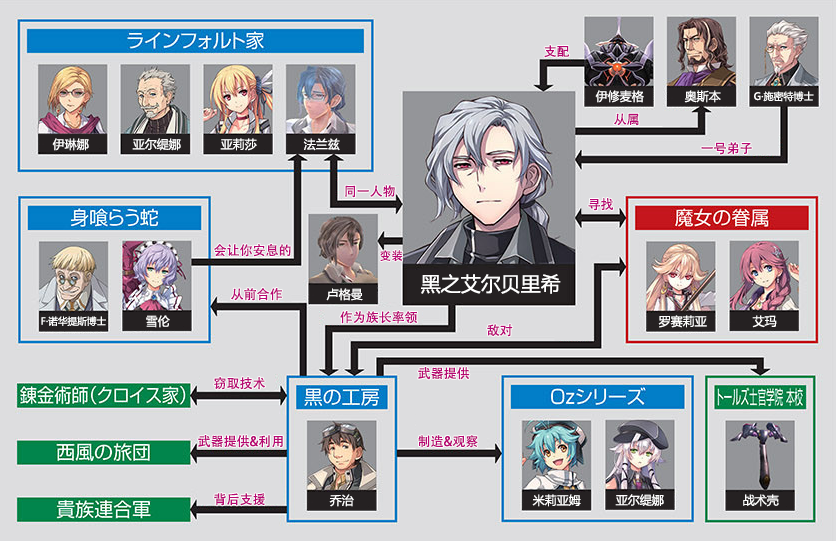
<style>
.page{position:relative;width:836px;height:541px;background:#dddddf}
.page>*{position:absolute;margin:0}
.t1{font:13px "AdobeHeitiStd-Regular";color:#b70773}
.t2{font:12px "MicrosoftYaHei";color:#ffffff}
.t3{font:10px "MicrosoftYaHei";color:#ffffff}
.t4{font:11.7px "AdobeHeitiStd-Regular";color:#b70773}
.t5{font:20px "MicrosoftYaHei";color:#ffffff}
.t6{font:9.7px "MicrosoftYaHei";color:#ffffff}
</style>
<div class="page">
<p class="t1" style="left:544px;top:45px;width:26px;height:13px">支配</p>
<p class="t2" style="left:595px;top:90px;width:49px;height:13px">伊修麦格</p>
<p class="t2" style="left:684px;top:90px;width:37px;height:13px">奥斯本</p>
<p class="t3" style="left:754px;top:91px;width:60px;height:11px">G·施密特博士</p>
<p class="t1" style="left:614px;top:113px;width:25px;height:13px">从属</p>
<p class="t2" style="left:52px;top:138px;width:37px;height:13px">伊琳娜</p>
<p class="t2" style="left:132px;top:138px;width:49px;height:13px">亚尔缇娜</p>
<p class="t2" style="left:220px;top:138px;width:37px;height:13px">亚莉莎</p>
<p class="t2" style="left:303px;top:138px;width:37px;height:13px">法兰兹</p>
<p class="t1" style="left:701px;top:142px;width:51px;height:13px">一号弟子</p>
<p class="t1" style="left:345px;top:185px;width:50px;height:13px">同一人物</p>
<p class="t1" style="left:588px;top:198px;width:26px;height:13px">寻找</p>
<p class="t1" style="left:214px;top:244px;width:77px;height:13px">会让你安息的</p>
<p class="t4" style="left:380px;top:250px;width:23px;height:12px">变装</p>
<p class="t5" style="left:421px;top:274px;width:140px;height:20px">黑之艾尔贝里希</p>
<p class="t1" style="left:231px;top:288px;width:51px;height:13px">从前合作</p>
<p class="t2" style="left:326px;top:288px;width:37px;height:13px">卢格曼</p>
<p class="t6" style="left:41px;top:316px;width:65px;height:10px">F·诺华提斯博士</p>
<p class="t2" style="left:146px;top:315px;width:24px;height:13px">雪伦</p>
<p class="t1" style="left:340px;top:311px;width:78px;height:13px">作为族长率领</p>
<p class="t2" style="left:658px;top:315px;width:49px;height:13px">罗赛莉亚</p>
<p class="t2" style="left:752px;top:315px;width:25px;height:13px">艾玛</p>
<p class="t1" style="left:487px;top:324px;width:26px;height:13px">敌对</p>
<p class="t1" style="left:214px;top:377px;width:52px;height:13px">窃取技术</p>
<p class="t1" style="left:418px;top:367px;width:52px;height:13px">武器提供</p>
<p class="t1" style="left:198px;top:435px;width:85px;height:13px">武器提供&amp;利用</p>
<p class="t1" style="left:418px;top:435px;width:60px;height:13px">制造&amp;观察</p>
<p class="t1" style="left:214px;top:493px;width:51px;height:13px">背后支援</p>
<p class="t2" style="left:329px;top:494px;width:25px;height:13px">乔治</p>
<p class="t2" style="left:532px;top:494px;width:49px;height:13px">米莉亚姆</p>
<p class="t2" style="left:615px;top:494px;width:49px;height:12px">亚尔缇娜</p>
<p class="t2" style="left:743px;top:494px;width:36px;height:13px">战术壳</p>
</div>
